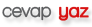
<style>
.page{position:relative;width:92px;height:27px;background:#ffffff}
.page>*{position:absolute;margin:0}
.t1{font:20px "WalkwayRounded";letter-spacing:0.02em;color:#5c5d5f}
.t2{font:20px "WalkwayRounded";letter-spacing:0.02em;color:#d81313;font-weight:bold}
</style>
<div class="page">
<p class="t1" style="left:2px;top:6px;width:87px;height:15px">cevap <span class="t2">yaz</span></p>
</div>
